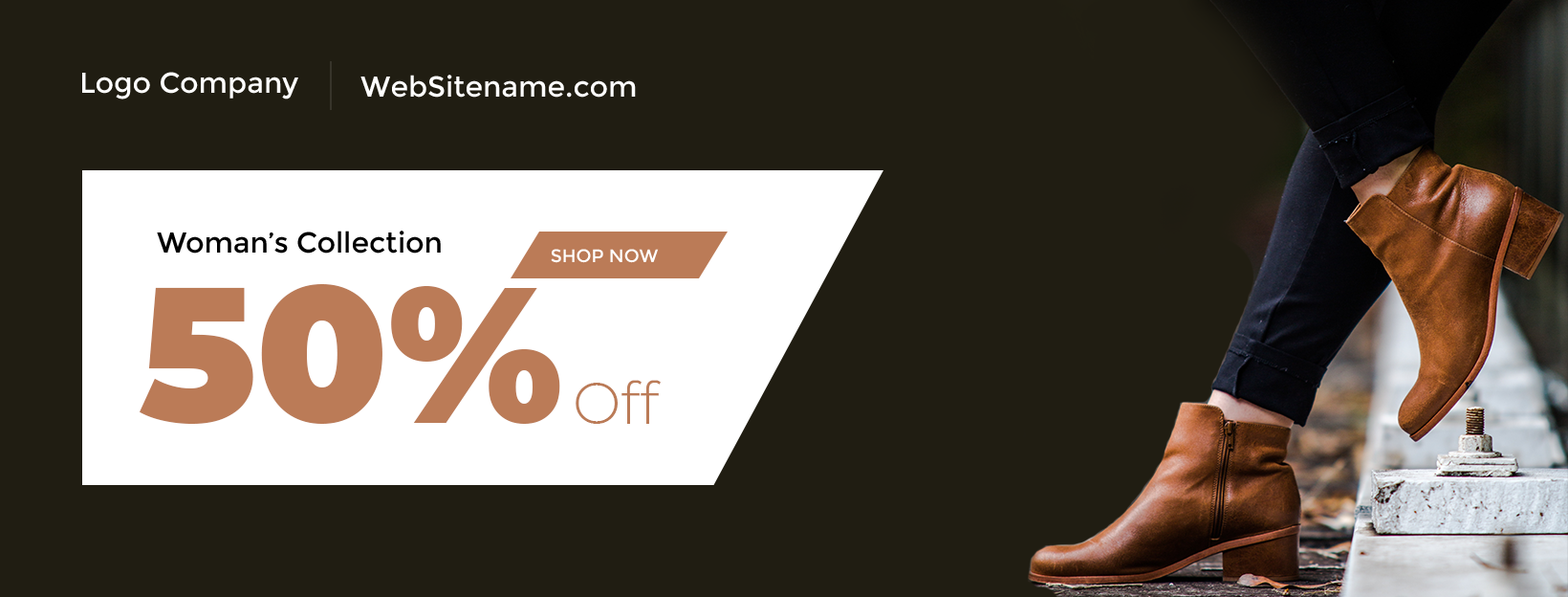
<style>
.page{position:relative;width:1568px;height:597px;background:#201d12}
.page>*{position:absolute;margin:0}
.t1{font:28.7px "Montserrat-Regular";color:#ffffff}
.t2{font:28.7px "Montserrat-Regular";color:#000000}
.t3{font:18.2px "Montserrat-Regular";color:#ffffff;text-transform:uppercase}
.t4{font:190.3px "Montserrat-Black";color:#bb7b57}
.t5{font:57.4px "Montserrat-Light";color:#bb7b57}
</style>
<div class="page">
<p class="t1" style="left:82px;top:72px;width:216px;height:27px">Logo Company</p>
<p class="t1" style="left:360px;top:75px;width:276px;height:23px">WebSitename.com</p>
<p class="t2" style="left:157px;top:230px;width:284px;height:23px">Woman’s Collection</p>
<p class="t3" style="left:551px;top:249px;width:108px;height:14px">Shop Now</p>
<p class="t4" style="left:140px;top:284px;width:420px;height:140px">50%</p>
<p class="t5" style="left:576px;top:380px;width:85px;height:44px">Off</p>
</div>
